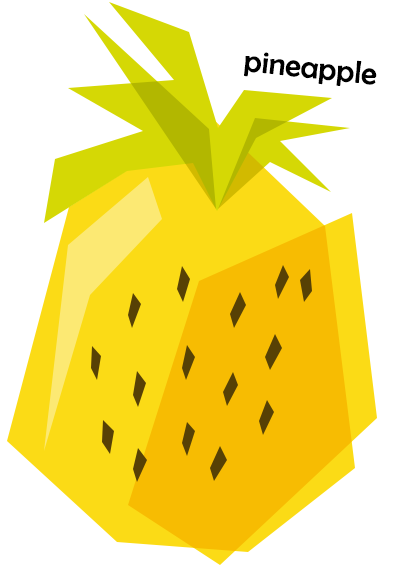
<style>
.page{position:relative;width:400px;height:566px;background:#ffffff}
.page>*{position:absolute;margin:0}
.t1{font:32px "BerlinSansFB-Reg";color:#000000}
</style>
<div class="page">
<p class="t1" style="left:244px;top:52px;width:133px;height:34px;rotate:6deg">pineapple</p>
</div>
